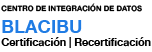
<style>
.page{position:relative;width:152px;height:52px;background:#ffffff}
.page>*{position:absolute;margin:0}
.t1{font:10.6px "HelveticaNeue-Bold";color:#000000}
.t2{font:7.6px "HelveticaNeue-Bold";color:#000000;text-transform:uppercase}
.t3{font:18.2px "HelveticaNeue-Bold";color:#207ce4}
</style>
<div class="page">
<p class="t1" style="left:1px;top:3px;width:150px;height:45px"><span class="t2">Centro de Integración de Datos<br></span><span class="t3">BLACIBU<br></span>Certificación | Recertificación</p>
</div>
